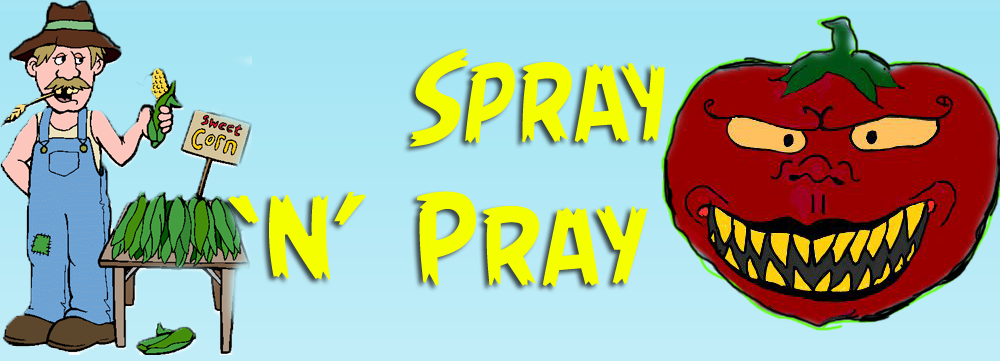
<style>
.page{position:relative;width:1000px;height:361px}
.page>*{position:absolute;margin:0}
.t1{font:96px "AngryBirds-Regular";color:#f6ff00}
.t2{font:96px "AngryBirds-Regular";color:#000000}
</style>
<div class="page">
<p class="t1" style="left:228px;top:48px;width:437px;height:239px"><span class="t2">        </span>Spray <br> ‘N’  Pray<span class="t2"> <br>Pray</span></p>
</div>
